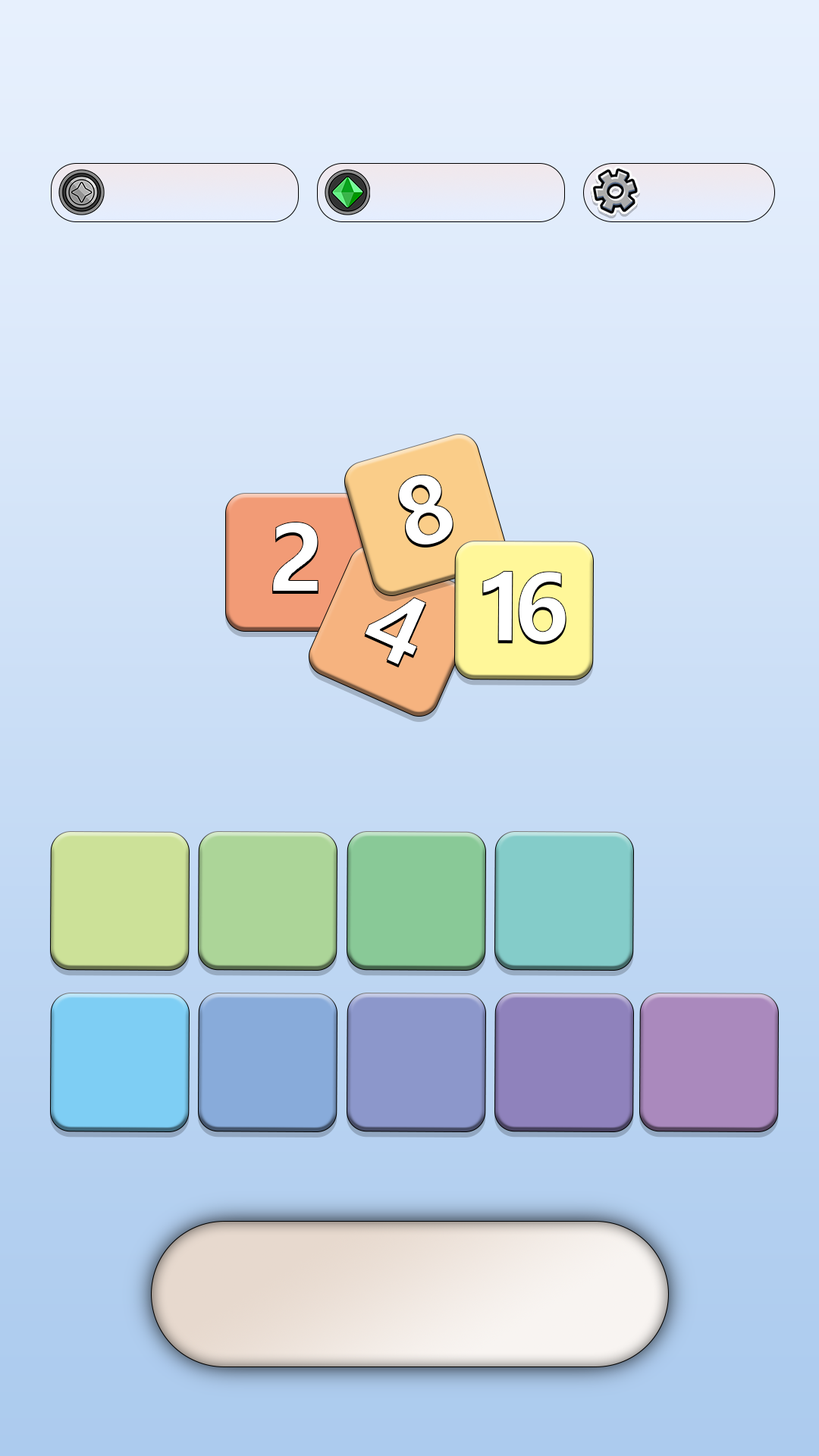
<style>
.page{position:relative;width:819px;height:1456px}
.page>*{position:absolute;margin:0}
.t1{font:90.7px "MicrosoftYaHei-Bold";color:#ffffff}
.t2{font:90.7px "MicrosoftYaHei-Bold";letter-spacing:-0.18em;color:#ffffff}
</style>
<div class="page">
<p class="t1" style="left:398px;top:474px;width:55px;height:71px;rotate:-16deg">8</p>
<p class="t1" style="left:272px;top:522px;width:46px;height:69px">2</p>
<p class="t2" style="left:482px;top:570px;width:84px;height:72px">16</p>
<p class="t1" style="left:364px;top:597px;width:63px;height:69px;rotate:24deg">4</p>
</div>
